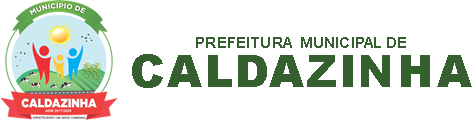
<style>
.page{position:relative;width:472px;height:120px;background:#ffffff}
.page>*{position:absolute;margin:0}
.t1{font:14.9px "Arial-BoldMT";color:#355f2f}
.t2{font:44.7px "Arial-Black";color:#355f2f}
</style>
<div class="page">
<p class="t1" style="left:196px;top:37px;width:210px;height:11px">PREFEITURA  MUNICIPAL DE</p>
<p class="t2" style="left:132px;top:54px;width:340px;height:34px">CALDAZINHA</p>
</div>
